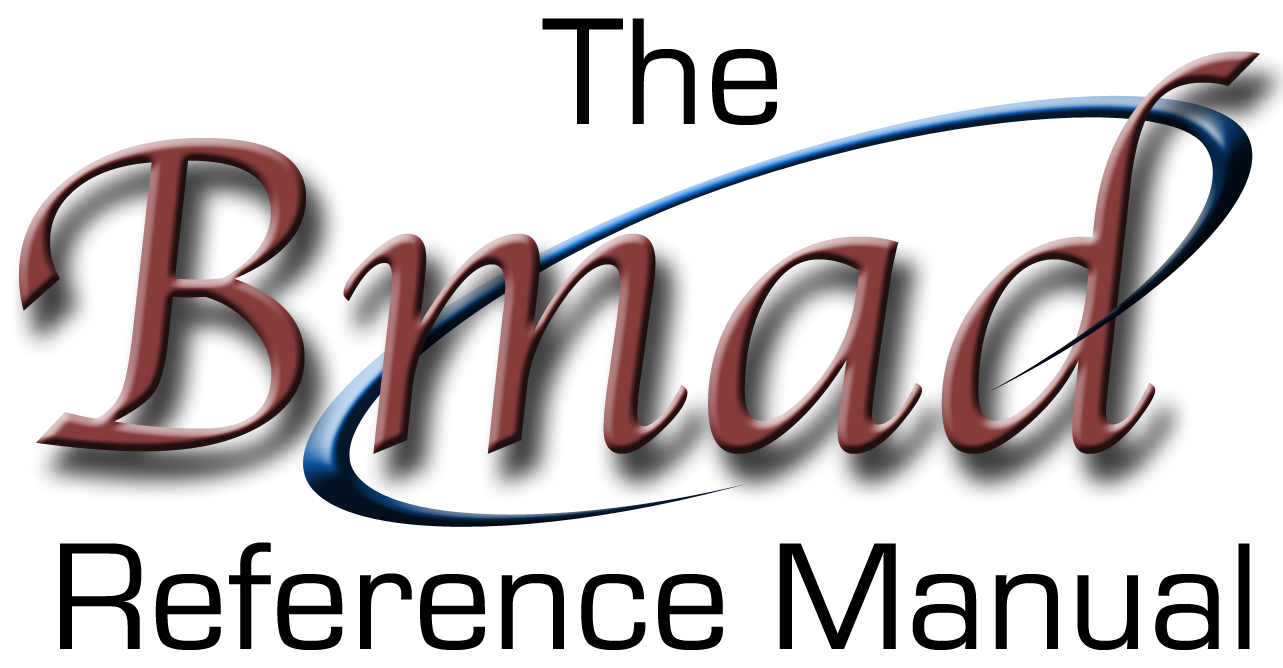
<style>
.page{position:relative;width:1283px;height:668px;background:#ffffff}
.page>*{position:absolute;margin:0}
.t1{font:158.3px "EurostileRegular";color:#000000}
.t2{font:458.3px "Apple-Chancery"}
</style>
<div class="page">
<p class="t1" style="left:542px;top:18px;width:235px;height:107px">The</p>
<p class="t2" style="left:18px;top:51px;width:1242px;height:403px">Bmad</p>
<p class="t1" style="left:60px;top:542px;width:1190px;height:108px">Reference Manual</p>
</div>
